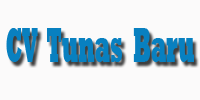
<style>
.page{position:relative;width:200px;height:100px;background:#fbfafa}
.page>*{position:absolute;margin:0}
.t1{font:49.5px "Rockwell-ExtraBold";color:#0880c0;scale:0.42 1}
</style>
<div class="page">
<p class="t1" style="left:6px;top:28px;width:188px;height:34px">CV  Tunas  Baru</p>
</div>
